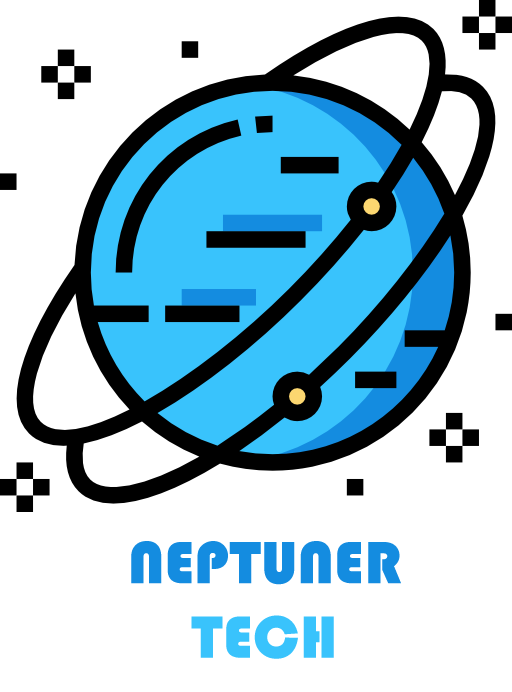
<style>
.page{position:relative;width:512px;height:692px;background:#ffffff}
.page>*{position:absolute;margin:0}
.t1{font:62px "Bauhaus93";color:#148ce0}
.t2{font:62px "Bauhaus93";color:#39c3fc}
</style>
<div class="page">
<p class="t1" style="left:131px;top:541px;width:270px;height:118px;text-align:center">NEPTUNER <br><span class="t2">TECH</span></p>
</div>
